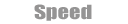
<style>
.page{position:relative;width:128px;height:24px;background:#ffffff}
.page>*{position:absolute;margin:0}
.t1{font:18px "Impact";color:#959494;scale:1.25 1}
</style>
<div class="page">
<p class="t1" style="left:34px;top:4px;width:58px;height:17px">Speed</p>
</div>
